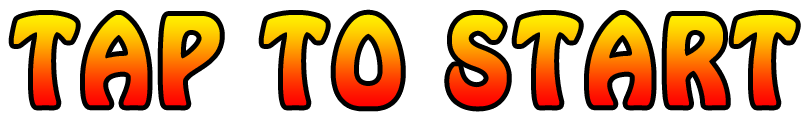
<style>
.page{position:relative;width:811px;height:123px;background:#ffffff}
.page>*{position:absolute;margin:0}
.t1{font:105.9px "HoboStd";letter-spacing:0.075em;font-weight:bold;scale:0.89 1}
</style>
<div class="page">
<p class="t1" style="left:13px;top:14px;width:783px;height:93px">TAP TO START</p>
</div>
